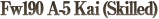
<style>
.page{position:relative;width:159px;height:19px;background:#ffffff}
.page>*{position:absolute;margin:0}
.t1{font:18px "RyuminPro-ExBold";letter-spacing:-0.09em;color:#4a3f32;font-weight:bold;scale:0.9 1}
</style>
<div class="page">
<p class="t1" style="left:0px;top:1px;width:158px;height:18px">Fw190 A-5 Kai (Skilled)</p>
</div>
